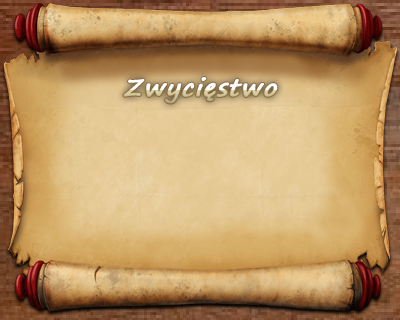
<style>
.page{position:relative;width:400px;height:320px}
.page>*{position:absolute;margin:0}
.t1{font:24px "SegoePrint-Bold";letter-spacing:0.025em;font-weight:bold;font-style:italic}
</style>
<div class="page">
<p class="t1" style="left:123px;top:77px;width:155px;height:27px">Zwycięstwo</p>
</div>
